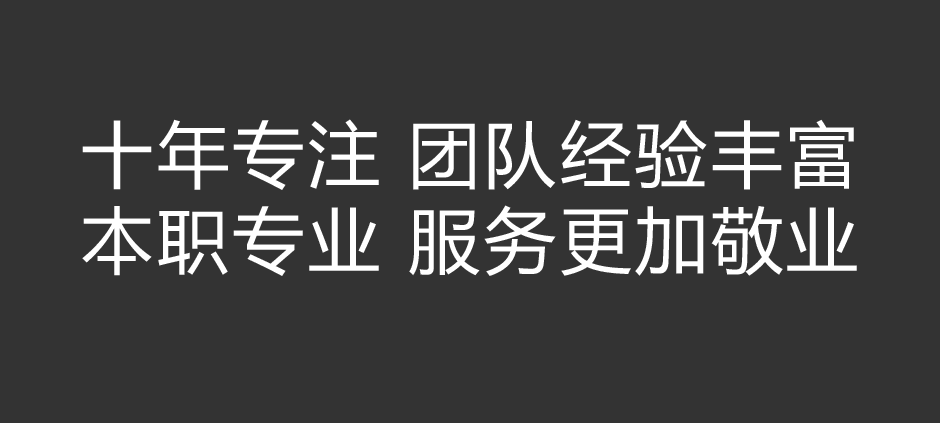
<style>
.page{position:relative;width:940px;height:423px;background:#333333}
.page>*{position:absolute;margin:0}
.t1{font:72px "MicrosoftYaHei";letter-spacing:0.05em;color:#ffffff}
</style>
<div class="page">
<p class="t1" style="left:82px;top:119px;width:775px;height:157px">十年专注 团队经验丰富<br>本职专业 服务更加敬业</p>
</div>
